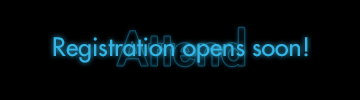
<style>
.page{position:relative;width:360px;height:100px;background:#000000}
.page>*{position:absolute;margin:0}
.t1{font:45.8px "FuturaStd-Heavy"}
.t2{font:25px "FuturaStd-Medium";color:#33b5e5}
</style>
<div class="page">
<p class="t1" style="left:116px;top:27px;width:129px;height:40px">Attend</p>
<p class="t2" style="left:53px;top:37px;width:255px;height:26px">Registration opens soon!</p>
</div>
